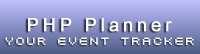
<style>
.page{position:relative;width:200px;height:54px}
.page>*{position:absolute;margin:0}
.t1{font:18px "ArialMT";letter-spacing:0.2em;color:#ffffff;font-weight:bold}
.t2{font:9px "04b21";letter-spacing:0.2em;color:#ffffff}
</style>
<div class="page">
<p class="t1" style="left:28px;top:18px;width:144px;height:14px">PHP Planner</p>
<p class="t2" style="left:5px;top:37px;width:189px;height:8px">YOUR EVENT TRACKER</p>
</div>
